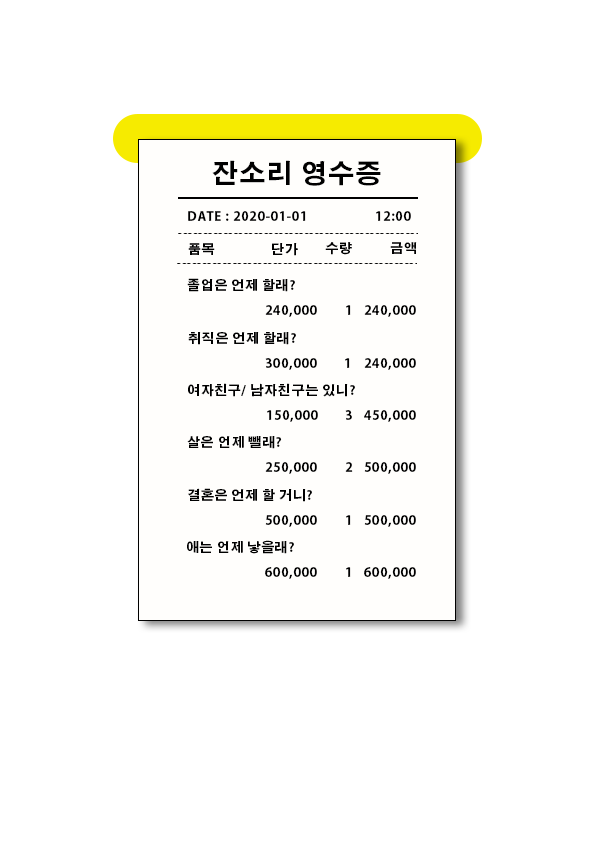
<style>
.page{position:relative;width:595px;height:842px;background:#ffffff}
.page>*{position:absolute;margin:0}
.t1{font:26px "AdobeGothicStd-Bold";letter-spacing:0.05em;color:#000000;text-transform:uppercase}
.t2{font:13px "AdobeGothicStd-Bold";letter-spacing:0.05em;color:#000000;text-transform:uppercase}
.t3{font:13px/67.9px "AdobeGothicStd-Bold";letter-spacing:0.05em;color:#000000;text-transform:uppercase}
</style>
<div class="page">
<p class="t1" style="left:212px;top:160px;width:169px;height:26px">잔소리 영수증</p>
<p class="t2" style="left:188px;top:211px;width:118px;height:10px">dATE : 2020-01-01</p>
<p class="t2" style="left:376px;top:211px;width:35px;height:10px">12:00</p>
<p class="t2" style="left:188px;top:243px;width:27px;height:12px">품목</p>
<p class="t2" style="left:272px;top:243px;width:26px;height:13px">단가</p>
<p class="t2" style="left:325px;top:242px;width:27px;height:13px">수량</p>
<p class="t2" style="left:390px;top:242px;width:27px;height:12px">금액</p>
<p class="t2" style="left:187px;top:278px;width:108px;height:14px">졸업은 언제 할래?</p>
<p class="t2" style="left:265px;top:305px;width:52px;height:12px">240,000</p>
<p class="t2" style="left:346px;top:305px;width:5px;height:10px">1</p>
<p class="t2" style="left:364px;top:305px;width:52px;height:12px">240,000</p>
<p class="t2" style="left:188px;top:332px;width:108px;height:13px">취직은 언제 할래?</p>
<p class="t2" style="left:265px;top:358px;width:52px;height:12px">300,000</p>
<p class="t2" style="left:345px;top:358px;width:5px;height:10px">1</p>
<p class="t2" style="left:364px;top:358px;width:52px;height:12px">240,000</p>
<p class="t2" style="left:188px;top:383px;width:167px;height:14px">여자친구/ 남자친구는 있니?</p>
<p class="t2" style="left:267px;top:410px;width:51px;height:12px">150,000</p>
<p class="t2" style="left:345px;top:410px;width:7px;height:10px">3</p>
<p class="t2" style="left:364px;top:410px;width:52px;height:12px">450,000</p>
<p class="t2" style="left:187px;top:436px;width:95px;height:13px">살은 언제 뺄래?</p>
<p class="t2" style="left:265px;top:462px;width:52px;height:12px">250,000</p>
<p class="t3" style="left:345px;top:462px;width:8px;height:10px">2<br>T</p>
<p class="t2" style="left:364px;top:462px;width:52px;height:12px">500,000</p>
<p class="t2" style="left:188px;top:488px;width:124px;height:14px">결혼은 언제 할 거니?</p>
<p class="t2" style="left:265px;top:515px;width:52px;height:12px">500,000</p>
<p class="t2" style="left:346px;top:515px;width:5px;height:10px">1</p>
<p class="t2" style="left:364px;top:515px;width:52px;height:12px">500,000</p>
<p class="t2" style="left:187px;top:540px;width:107px;height:14px">애는 언제 낳을래?</p>
<p class="t2" style="left:265px;top:567px;width:52px;height:12px">600,000</p>
<p class="t2" style="left:346px;top:567px;width:5px;height:10px">1</p>
<p class="t2" style="left:364px;top:567px;width:52px;height:12px">600,000</p>
</div>
